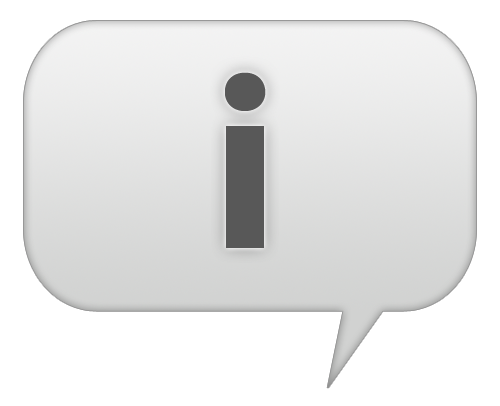
<style>
.page{position:relative;width:500px;height:406px;background:#ffffff}
.page>*{position:absolute;margin:0}
.t1{font:250px "MyriadPro-Bold";color:#585858}
</style>
<div class="page">
<p class="t1" style="left:225px;top:72px;width:41px;height:176px">i</p>
</div>
